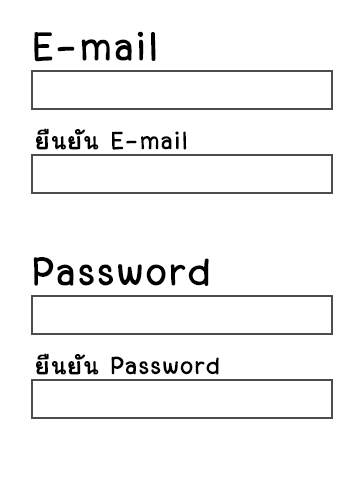
<style>
.page{position:relative;width:363px;height:483px;background:#ffffff}
.page>*{position:absolute;margin:0}
.t1{font:55.8px "LayijiMaHaNiYomV1.5";letter-spacing:0.01em;color:#000000;font-weight:bold}
.t2{font:34.3px "LayijiMaHaNiYomV1.5";letter-spacing:0.01em;color:#000000;font-weight:bold}
</style>
<div class="page">
<p class="t1" style="left:34px;top:31px;width:122px;height:31px">E-mail</p>
<p class="t2" style="left:36px;top:128px;width:151px;height:22px">ยืนยัน E-mail</p>
<p class="t1" style="left:33px;top:257px;width:176px;height:29px">Password</p>
<p class="t2" style="left:36px;top:353px;width:183px;height:22px">ยืนยัน Password</p>
</div>
